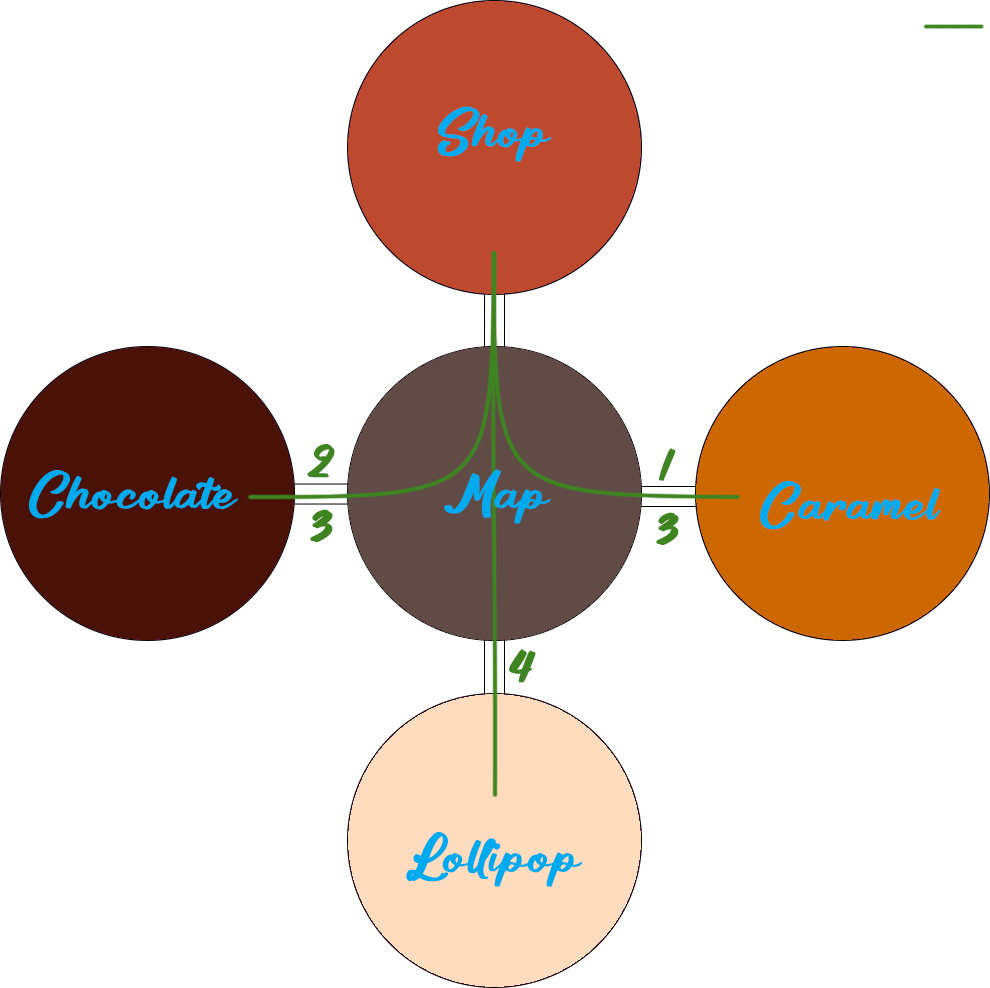
<style>
.page{position:relative;width:990px;height:988px;background:#ffffff}
.page>*{position:absolute;margin:0}
.t1{font:50px "Candy";color:#00aaee}
.t2{font:50px "Candy";color:#3e8521}
</style>
<div class="page">
<p class="t1" style="left:437px;top:106px;width:115px;height:56px">Shop</p>
<p class="t2" style="left:307px;top:444px;width:28px;height:34px">2</p>
<p class="t2" style="left:659px;top:448px;width:17px;height:33px">1</p>
<p class="t1" style="left:29px;top:470px;width:209px;height:49px">Chocolate</p>
<p class="t1" style="left:444px;top:469px;width:107px;height:55px">Map</p>
<p class="t1" style="left:760px;top:481px;width:181px;height:49px">Caramel</p>
<p class="t2" style="left:310px;top:509px;width:23px;height:33px">3</p>
<p class="t2" style="left:656px;top:512px;width:23px;height:33px">3</p>
<p class="t2" style="left:509px;top:649px;width:27px;height:34px">4</p>
<p class="t1" style="left:406px;top:831px;width:177px;height:56px">Lollipop</p>
</div>
